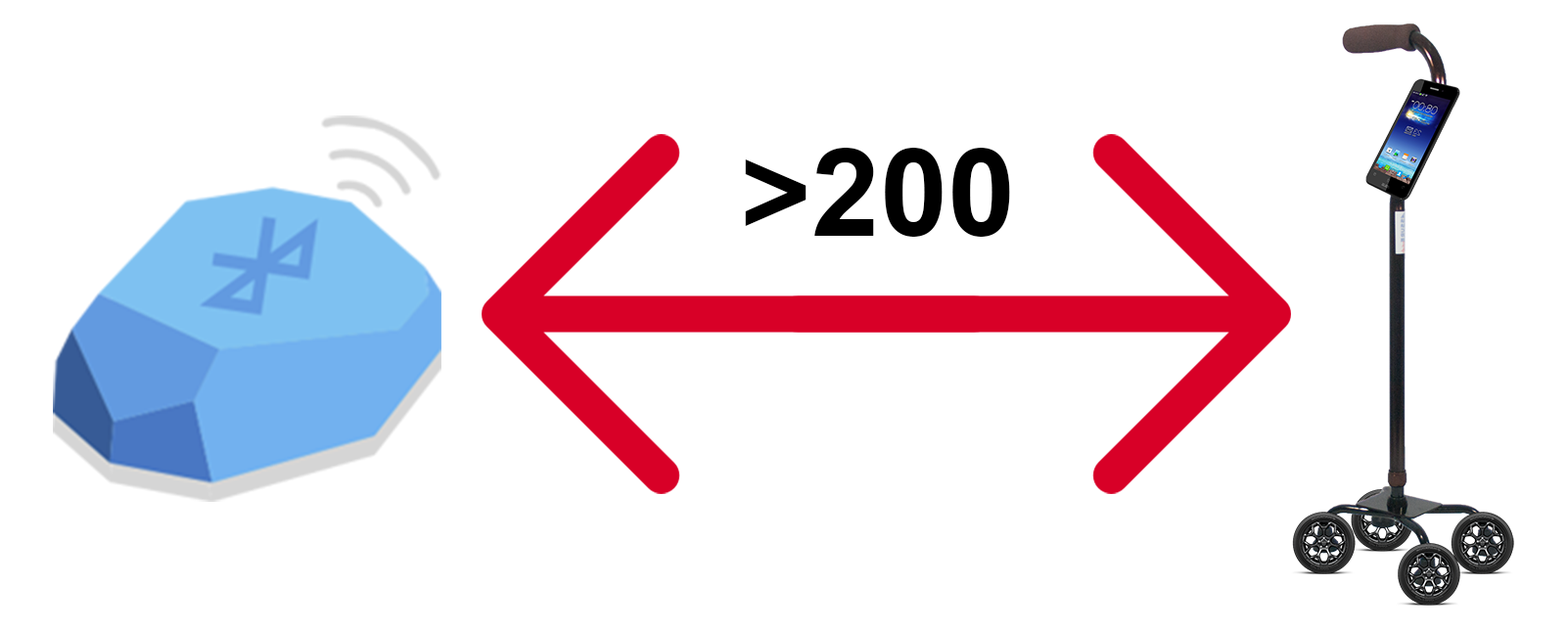
<style>
.page{position:relative;width:1568px;height:631px;background:#ffffff}
.page>*{position:absolute;margin:0}
.t1{font:122.3px "Arial-BoldMT";color:#000000}
</style>
<div class="page">
<p class="t1" style="left:745px;top:148px;width:265px;height:89px">&gt;200</p>
</div>
